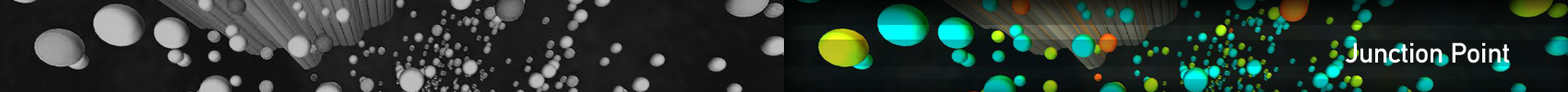
<style>
.page{position:relative;width:1568px;height:92px}
.page>*{position:absolute;margin:0}
.t1{font:27.7px "DIN-1451-Mittelschrift-Regular";color:#ffffff}
</style>
<div class="page">
<p class="t1" style="left:1345px;top:42px;width:164px;height:22px">Junction Point</p>
</div>
